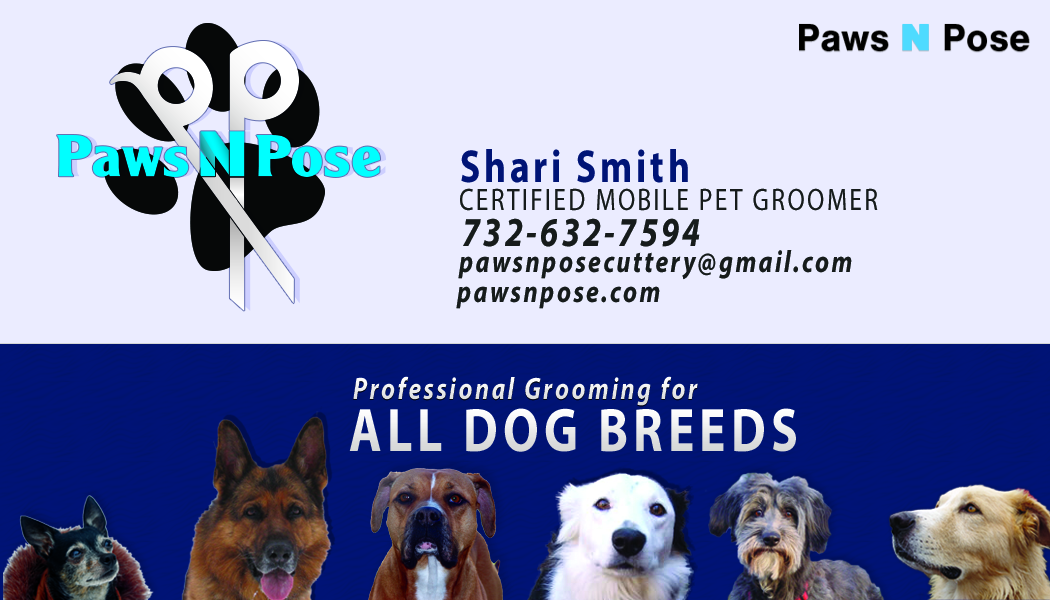
<style>
.page{position:relative;width:1050px;height:600px;background:#ebecff}
.page>*{position:absolute;margin:0}
.t1{font:46.5px "MyriadPro-Bold";letter-spacing:0.1em;color:#001476;scale:0.81 1}
.t2{font:31px "MyriadPro-Regular";letter-spacing:0.1em;color:#161b1b;scale:0.81 1}
.t3{font:41.3px "MyriadPro-BoldIt";letter-spacing:0.1em;color:#161b1b;scale:0.81 1}
.t4{font:31px "MyriadPro-BoldIt";letter-spacing:0.1em;color:#161b1b;scale:0.81 1}
.t5{font:31px "MyriadPro-BoldIt";letter-spacing:0.1em;color:#ffffff;scale:0.81 1}
.t6{font:62px "MyriadPro-Bold";letter-spacing:0.1em;color:#e9e9e9;scale:0.81 1}
</style>
<div class="page">
<p class="t1" style="left:461px;top:149px;width:227px;height:34px">Shari Smith</p>
<p class="t2" style="left:460px;top:188px;width:418px;height:23px">CERTIFIED MOBILE PET GROOMER</p>
<p class="t3" style="left:463px;top:218px;width:237px;height:29px">732-632-7594</p>
<p class="t4" style="left:458px;top:250px;width:394px;height:30px">pawsnposecuttery@gmail.com</p>
<p class="t4" style="left:456px;top:286px;width:204px;height:23px">pawsnpose.com</p>
<p class="t5" style="left:353px;top:376px;width:345px;height:30px">Professional Grooming for</p>
<p class="t6" style="left:349px;top:408px;width:447px;height:44px">ALL DOG BREEDS</p>
</div>
